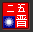
<style>
.page{position:relative;width:33px;height:32px;background:#f20000}
.page>*{position:absolute;margin:0}
.t1{font:10.4px "SimSun";color:#ffffff}
.t2{font:11.7px "SimSun";color:#ffffff}
</style>
<div class="page">
<p class="t1" style="left:7px;top:4px;width:18px;height:8px">二五</p>
<p class="t2" style="left:16px;top:15px;width:11px;height:12px">晋</p>
</div>
